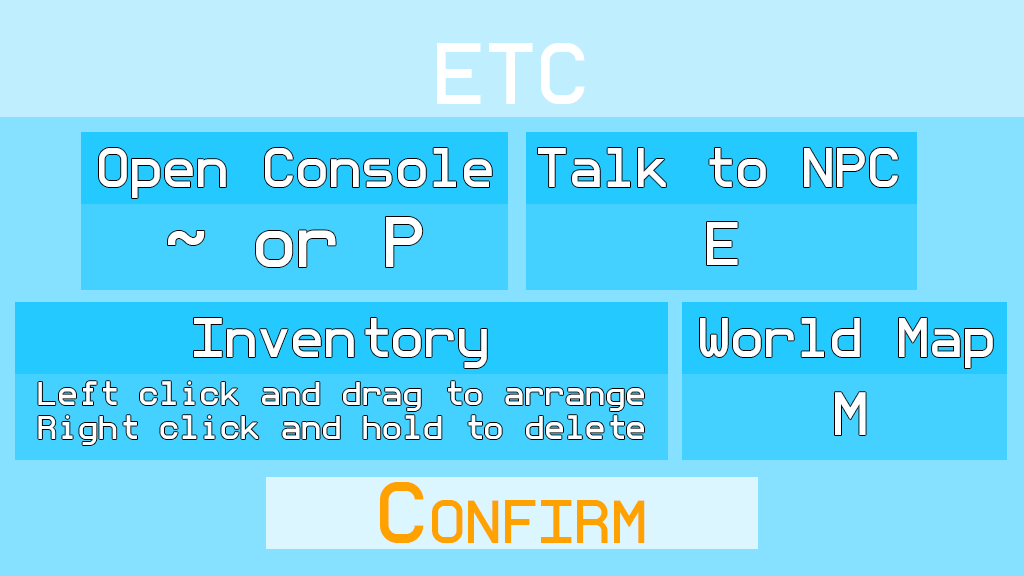
<style>
.page{position:relative;width:1024px;height:576px;background:#85e1ff}
.page>*{position:absolute;margin:0}
.t1{font:77.9px "monoMMM5-Regular";color:#ffffff;font-variant:small-caps}
.t2{font:50px "monoMMM5-Regular";color:#ffffff}
.t3{font:65.4px "monoMMM5-Regular";color:#ffffff}
.t4{font:55px "monoMMM5-Regular";color:#ffffff}
.t5{font:30.4px/34.4px "monoMMM5-Regular";color:#ffffff}
.t6{font:77.9px "monoMMM5-Regular";color:#ffa200;font-variant:small-caps}
</style>
<div class="page">
<p class="t1" style="left:437px;top:43px;width:148px;height:61px">ETC</p>
<p class="t2" style="left:99px;top:148px;width:393px;height:50px">Open Console</p>
<p class="t2" style="left:538px;top:148px;width:360px;height:39px">Talk to NPC</p>
<p class="t3" style="left:168px;top:217px;width:255px;height:50px">~ or P</p>
<p class="t4" style="left:707px;top:222px;width:31px;height:43px">E</p>
<p class="t2" style="left:194px;top:318px;width:293px;height:50px">Inventory</p>
<p class="t2" style="left:700px;top:318px;width:293px;height:50px">World Map</p>
<p class="t5" style="left:38px;top:381px;width:606px;height:64px;text-align:center">Left click and drag to arrange<br>Right click and hold to delete</p>
<p class="t4" style="left:835px;top:392px;width:31px;height:43px">M</p>
<p class="t6" style="left:380px;top:482px;width:265px;height:61px">Confirm</p>
</div>
